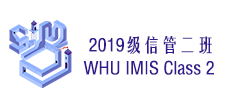
<style>
.page{position:relative;width:233px;height:108px;background:#ffffff}
.page>*{position:absolute;margin:0}
.t1{font:18px "FZYTK--GBK1-0";color:#351a8e}
</style>
<div class="page">
<p class="t1" style="left:89px;top:36px;width:123px;height:18px">2019级信管二班</p>
<p class="t1" style="left:83px;top:60px;width:131px;height:15px">WHU IMIS Class 2</p>
</div>
